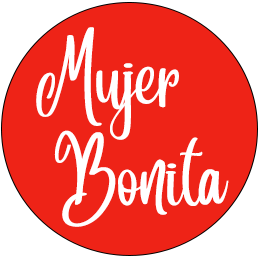
<style>
.page{position:relative;width:258px;height:258px;background:#ee2317}
.page>*{position:absolute;margin:0}
.t1{font:15.3px/100px "Angelina";color:#ffffff}
</style>
<div class="page">
<p class="t1" style="left:36px;top:27px;width:193px;height:200px;text-align:center">Mujer<br>    Bonita</p>
</div>
